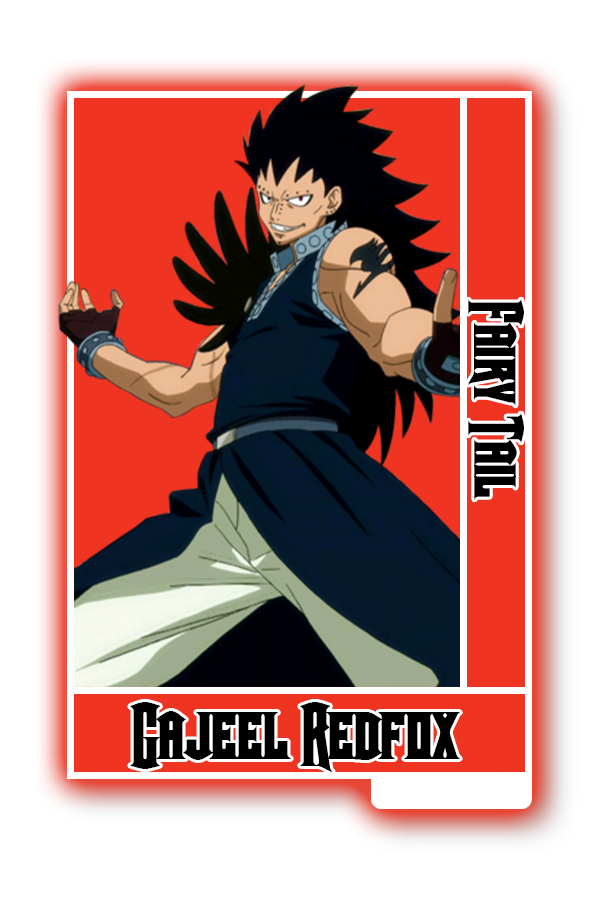
<style>
.page{position:relative;width:600px;height:900px;background:#ffffff}
.page>*{position:absolute;margin:0}
.t1{font:61.5px "Crown-Title";color:#000000}
.t2{font:70.1px "Crown-Title";color:#000000}
</style>
<div class="page">
<p class="t1" style="left:468px;top:299px;width:56px;height:201px;rotate:90deg">Fairy Tail</p>
<p class="t2" style="left:130px;top:702px;width:330px;height:70px">Gajeel Redfox</p>
</div>
